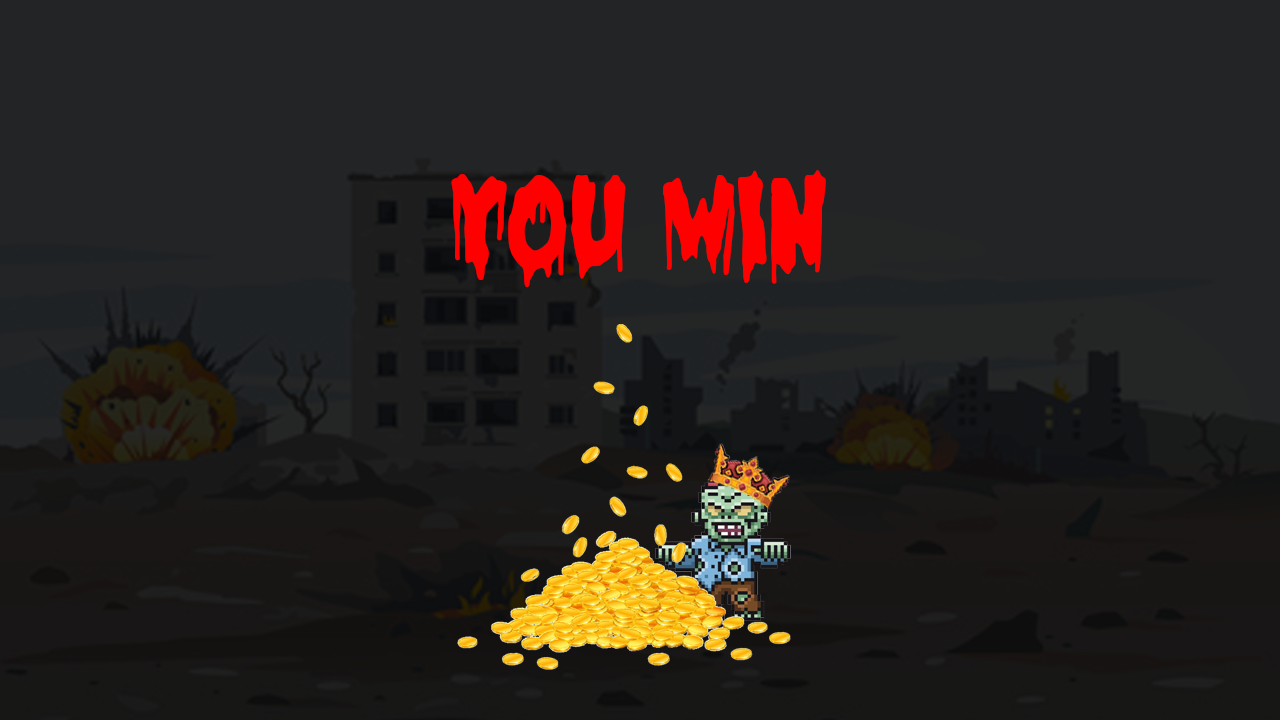
<style>
.page{position:relative;width:1280px;height:720px;background:#232425}
.page>*{position:absolute;margin:0}
.t1{font:150px "HalloweenMorning";color:#ff0000}
</style>
<div class="page">
<p class="t1" style="left:451px;top:170px;width:375px;height:117px">You WIN</p>
</div>
